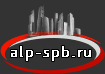
<style>
.page{position:relative;width:105px;height:74px;background:#333333}
.page>*{position:absolute;margin:0}
.t1{font:15px "BlissPro-Light";letter-spacing:0.06em;color:#fefefe;font-weight:bold;scale:1.08 1}
</style>
<div class="page">
<p class="t1" style="left:11px;top:46px;width:80px;height:15px">alp-spb.ru</p>
</div>
